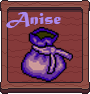
<style>
.page{position:relative;width:90px;height:94px;background:#853a3a}
.page>*{position:absolute;margin:0}
.t1{font:18px "MaturaMTScriptCapitals";color:#aa89ec}
</style>
<div class="page">
<p class="t1" style="left:6px;top:12px;width:55px;height:16px">Anise</p>
</div>
